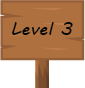
<style>
.page{position:relative;width:85px;height:88px;background:#ae703e}
.page>*{position:absolute;margin:0}
.t1{font:18px "MVBoli";color:#04090a}
</style>
<div class="page">
<p class="t1" style="left:12px;top:22px;width:61px;height:13px">Level 3</p>
</div>
